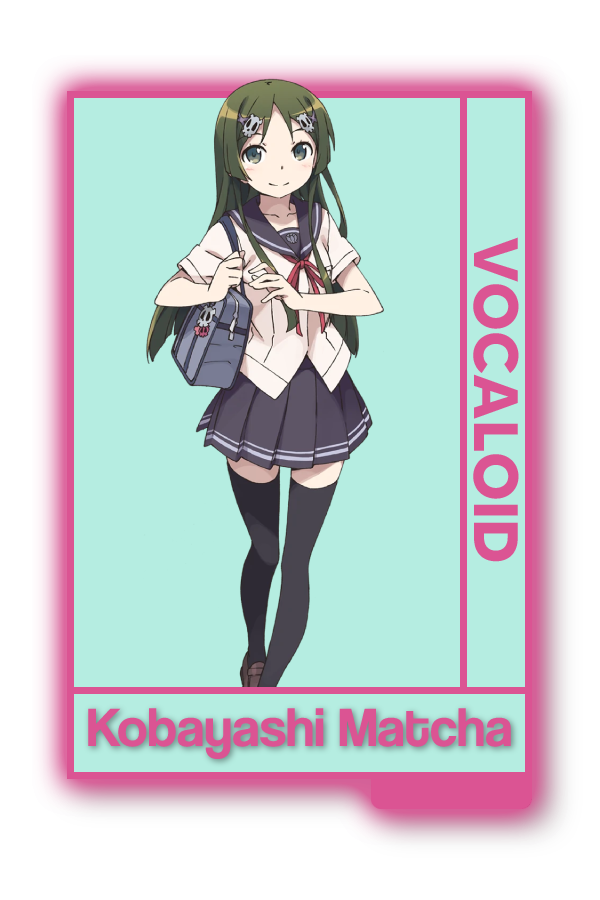
<style>
.page{position:relative;width:600px;height:900px;background:#b5ede1}
.page>*{position:absolute;margin:0}
.t1{font:62.5px "MADETOMMY-Bold";color:#db5493}
.t2{font:56.1px "CoolveticaRg-Regular";color:#db5493}
</style>
<div class="page">
<p class="t1" style="left:473px;top:237px;width:46px;height:325px;rotate:90deg">VOCALOID</p>
<p class="t2" style="left:88px;top:708px;width:423px;height:51px">Kobayashi Matcha</p>
</div>
